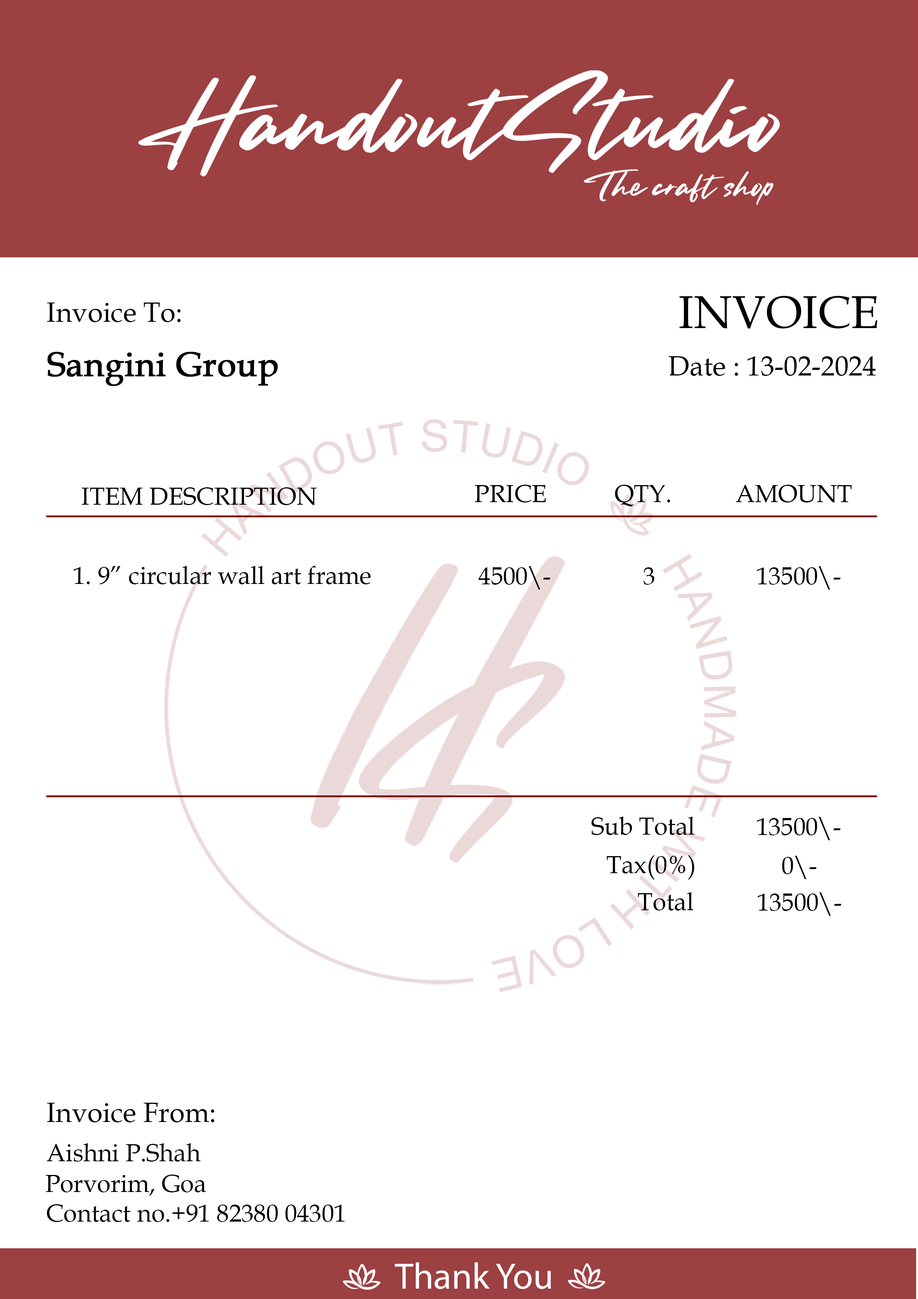
<style>
.page{position:relative;width:918px;height:1299px;background:#ffffff}
.page>*{position:absolute;margin:0}
.t1{font:63.1px "SmoothFantasy";color:#ffffff}
.t2{font:21.7px "SmoothFantasy";color:#fffefe}
.t3{font:27.8px "BookAntiqua";color:#000000}
.t4{font:27.8px "BookAntiqua";color:#000000;text-transform:uppercase}
.t5{font:46.3px "BookAntiqua";color:#000000;text-transform:uppercase}
.t6{font:33.9px "BookAntiqua";color:#000000;font-weight:bold}
.t7{font:24.7px "BookAntiqua";color:#000000;text-transform:uppercase}
.t8{font:24.7px "BookAntiqua";color:#000000}
.t9{font:37px "MyriadPro-Regular";color:#fffefe}
</style>
<div class="page">
<p class="t1" style="left:138px;top:70px;width:642px;height:107px">HandoutStudio</p>
<p class="t2" style="left:584px;top:169px;width:189px;height:36px">The craft shop</p>
<p class="t3" style="left:47px;top:302px;width:134px;height:20px"><span class="t4">I</span>nvoice<span class="t4"> T</span>o<span class="t4">:</span></p>
<p class="t5" style="left:679px;top:296px;width:199px;height:32px">invoice</p>
<p class="t6" style="left:47px;top:352px;width:231px;height:34px">Sangini Group</p>
<p class="t3" style="left:669px;top:356px;width:207px;height:20px">Date : 13-02-2024</p>
<p class="t7" style="left:475px;top:485px;width:71px;height:17px">price</p>
<p class="t7" style="left:615px;top:485px;width:55px;height:21px">qty.</p>
<p class="t7" style="left:736px;top:485px;width:116px;height:17px">amount</p>
<p class="t7" style="left:82px;top:487px;width:235px;height:18px">item description</p>
<p class="t8" style="left:74px;top:566px;width:297px;height:18px">1. 9” circular wall art frame</p>
<p class="t8" style="left:478px;top:566px;width:73px;height:23px">4500\-</p>
<p class="t8" style="left:643px;top:567px;width:12px;height:18px">3</p>
<p class="t8" style="left:757px;top:566px;width:84px;height:23px">13500\-</p>
<p class="t8" style="left:591px;top:816px;width:104px;height:19px">Sub Total</p>
<p class="t8" style="left:757px;top:817px;width:84px;height:23px">13500\-</p>
<p class="t8" style="left:607px;top:855px;width:88px;height:25px">Tax(0%)</p>
<p class="t8" style="left:782px;top:856px;width:35px;height:23px">0\-</p>
<p class="t8" style="left:638px;top:892px;width:55px;height:18px">Total</p>
<p class="t8" style="left:758px;top:892px;width:84px;height:24px">13500\-</p>
<p class="t3" style="left:47px;top:1103px;width:167px;height:19px"><span class="t4">I</span>nvoice From<span class="t4">:</span></p>
<p class="t8" style="left:47px;top:1143px;width:154px;height:18px">Aishni P.Shah</p>
<p class="t8" style="left:46px;top:1174px;width:160px;height:21px">Porvorim, Goa</p>
<p class="t8" style="left:47px;top:1204px;width:298px;height:18px">Contact no.+91 82380 04301</p>
<p class="t9" style="left:395px;top:1262px;width:156px;height:27px">Thank You</p>
</div>
